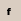
<style>
.page{position:relative;width:21px;height:21px;background:#d9cdc1}
.page>*{position:absolute;margin:0}
.t1{font:9px "Tahoma-Bold";color:#000000}
</style>
<div class="page">
<p class="t1" style="left:7px;top:8px;width:4px;height:7px">f</p>
</div>
